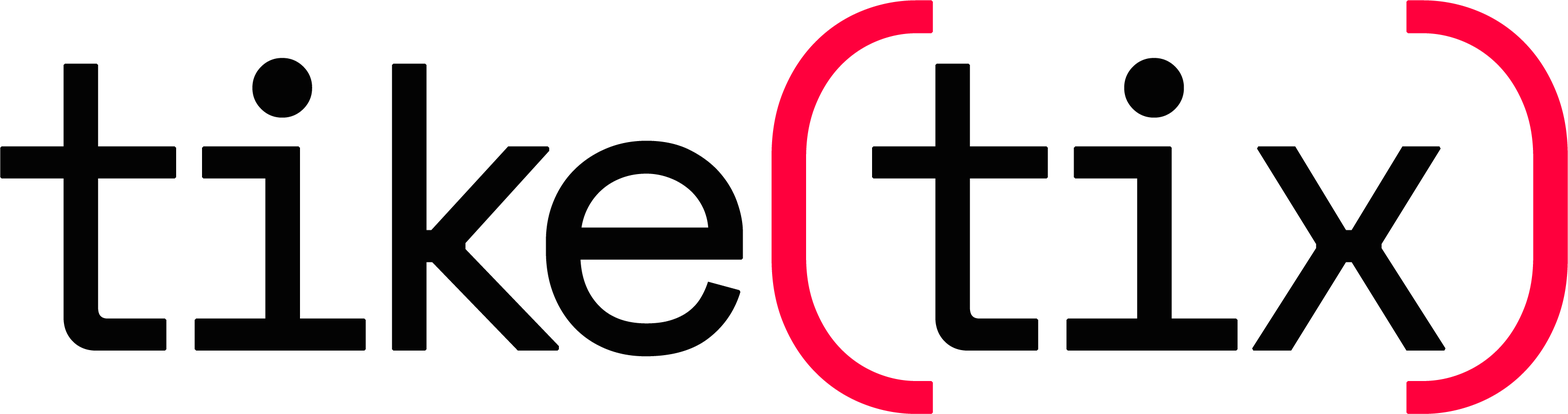
<style>
.page{position:relative;width:1568px;height:414px;background:#ffffff}
.page>*{position:absolute;margin:0}
.t1{font:406.1px "SpaceMono-Regular";letter-spacing:-0.1em;color:#030303;font-weight:bold}
.t2{font:406.1px "SpaceMono-Regular";letter-spacing:-0.1em;color:#ff003d;font-weight:bold}
</style>
<div class="page">
<p class="t1" style="left:0px;top:0px;width:1568px;height:414px">tike<span class="t2">(</span>tix<span class="t2">)</span></p>
</div>
